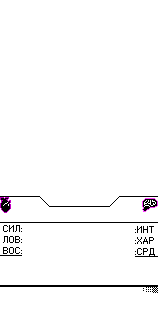
<style>
.page{position:relative;width:163px;height:336px;background:#ffffff}
.page>*{position:absolute;margin:0}
.t1{font:14.3px "Silver";letter-spacing:0.005em;color:#000000;scale:1.35 1}
.t2{font:14.4px "Silver";letter-spacing:0.005em;color:#000000;scale:1.34 1}
.t3{font:14.8px "Silver";letter-spacing:0.005em;color:#000000;scale:1.25 1}
.t4{font:14.5px "Silver";letter-spacing:-0.01em;color:#000000;scale:1.31 1}
</style>
<div class="page">
<p class="t1" style="left:3px;top:236px;width:17px;height:7px">ЛОВ</p>
<p class="t2" style="left:137px;top:237px;width:17px;height:7px">ХАР</p>
<p class="t3" style="left:3px;top:247px;width:17px;height:7px">ВОС</p>
<p class="t4" style="left:137px;top:248px;width:18px;height:8px">СРД</p>
</div>
